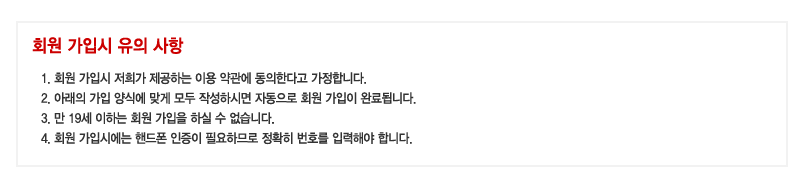
<style>
.page{position:relative;width:795px;height:186px;background:#ffffff}
.page>*{position:absolute;margin:0}
.t1{font:18px "YDIYGO340";color:#cc0000;scale:0.9 1}
.t2{font:13px/20px "YDIYGO330";letter-spacing:-0.025em;color:#333333;scale:0.9 1}
</style>
<div class="page">
<p class="t1" style="left:32px;top:37px;width:152px;height:17px">회원 가입시 유의 사항</p>
<p class="t2" style="left:41px;top:72px;width:375px;height:73px">1. 회원 가입시 저희가 제공하는 이용 약관에 동의한다고 가정합니다.<br>2. 아래의 가입 양식에 맞게 모두 작성하시면 자동으로 회원 가입이 완료됩니다.<br>3. 만 19세 이하는 회원 가입을 하실 수 없습니다.<br>4. 회원 가입시에는 핸드폰 인증이 필요하므로 정확히 번호를 입력해야 합니다.</p>
</div>
